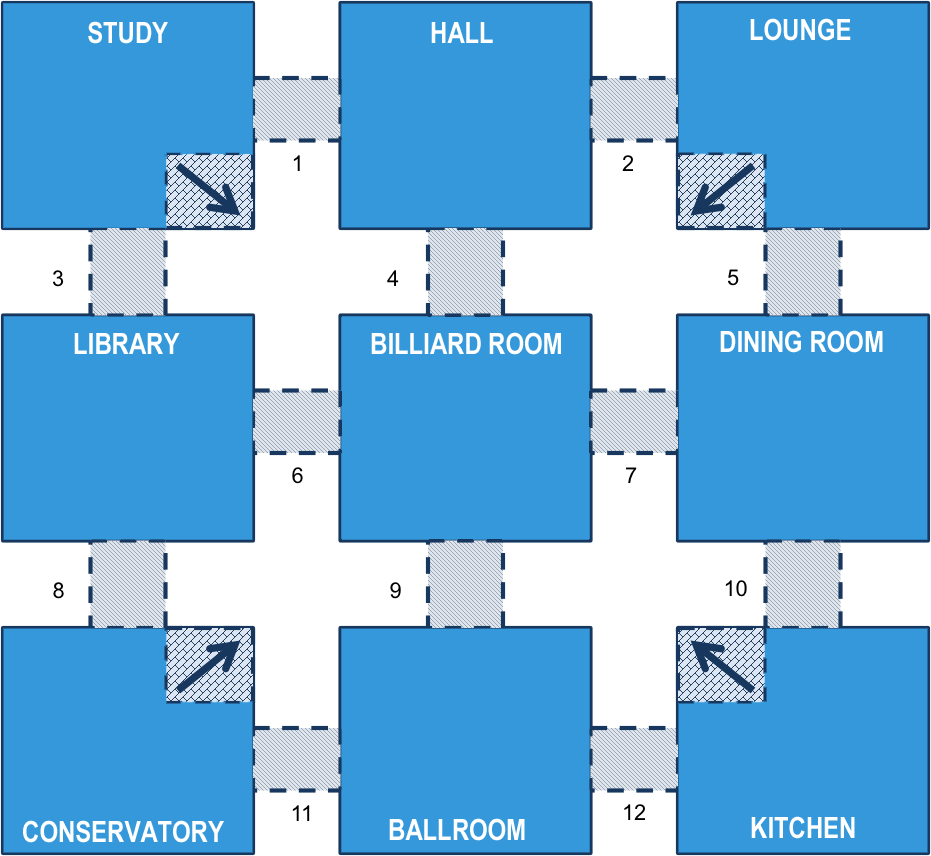
<style>
.page{position:relative;width:931px;height:856px;background:#3498db}
.page>*{position:absolute;margin:0}
.t1{font:29.2px "ArialNarrow-Bold";color:#ffffff}
</style>
<div class="page">
<p class="t1" style="left:88px;top:21px;width:80px;height:23px">STUDY</p>
<p class="t1" style="left:431px;top:22px;width:62px;height:21px">HALL</p>
<p class="t1" style="left:750px;top:18px;width:101px;height:23px">LOUNGE</p>
<p class="t1" style="left:74px;top:333px;width:106px;height:21px">LIBRARY</p>
<p class="t1" style="left:371px;top:332px;width:190px;height:23px">BILLIARD ROOM</p>
<p class="t1" style="left:720px;top:330px;width:163px;height:23px">DINING ROOM</p>
<p class="t1" style="left:23px;top:820px;width:201px;height:23px">CONSERVATORY</p>
<p class="t1" style="left:389px;top:818px;width:136px;height:23px">BALLROOM</p>
<p class="t1" style="left:751px;top:816px;width:104px;height:23px">KITCHEN</p>
</div>
